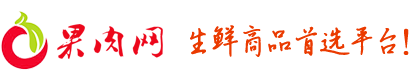
<style>
.page{position:relative;width:420px;height:80px;background:#ffffff}
.page>*{position:absolute;margin:0}
.t1{font:32px "ÊéÌå·»ÕÔ¾Å½­¸Ö±ÊÐÐÊé";color:#ea3a00;font-weight:bold}
</style>
<div class="page">
<p class="t1" style="left:190px;top:25px;width:219px;height:32px">生鲜商品首选平台！</p>
</div>
